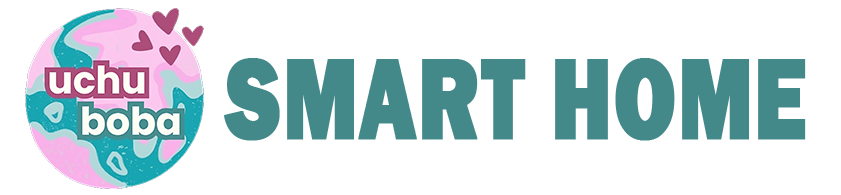
<style>
.page{position:relative;width:841px;height:195px;background:#ffffff}
.page>*{position:absolute;margin:0}
.t1{font:118.1px "FranklinGothic-Heavy";color:#448989;text-transform:uppercase;font-weight:bold;scale:0.75 1}
</style>
<div class="page">
<p class="t1" style="left:224px;top:58px;width:582px;height:83px">SMART HOME</p>
</div>
